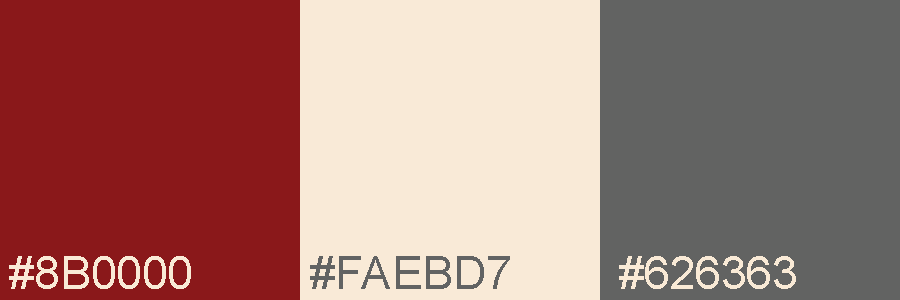
<style>
.page{position:relative;width:900px;height:300px;background:#f9ead7}
.page>*{position:absolute;margin:0}
.t1{font:45.8px "ArialMT";color:#f9ead6}
.t2{font:45.8px "ArialMT";color:#626363}
</style>
<div class="page">
<p class="t1" style="left:9px;top:256px;width:182px;height:33px">#8B0000</p>
<p class="t2" style="left:310px;top:256px;width:200px;height:33px">#FAEBD7</p>
<p class="t1" style="left:619px;top:256px;width:177px;height:33px">#626363</p>
</div>
